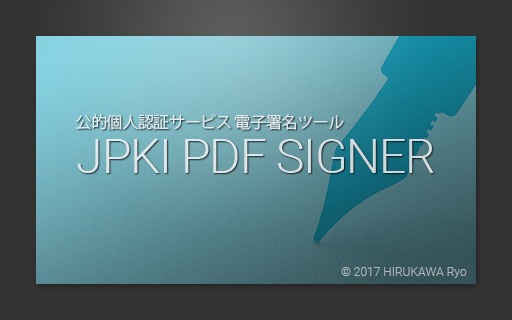
<style>
.page{position:relative;width:512px;height:320px;background:#333333}
.page>*{position:absolute;margin:0}
.t1{font:16px "KozGoPr6N-Regular";letter-spacing:-0.025em;color:#deebed}
.t2{font:48px "Roboto-Light";letter-spacing:-0.025em;color:#dae5e7}
.t3{font:12px "Roboto-Light";color:#aeb7b9}
</style>
<div class="page">
<p class="t1" style="left:76px;top:114px;width:268px;height:16px">公的個人認証サービス 電子署名ツール</p>
<p class="t2" style="left:77px;top:139px;width:357px;height:34px">JPKI PDF SIGNER</p>
<p class="t3" style="left:341px;top:267px;width:126px;height:11px">© 2017 HIRUKAWA Ryo</p>
</div>
